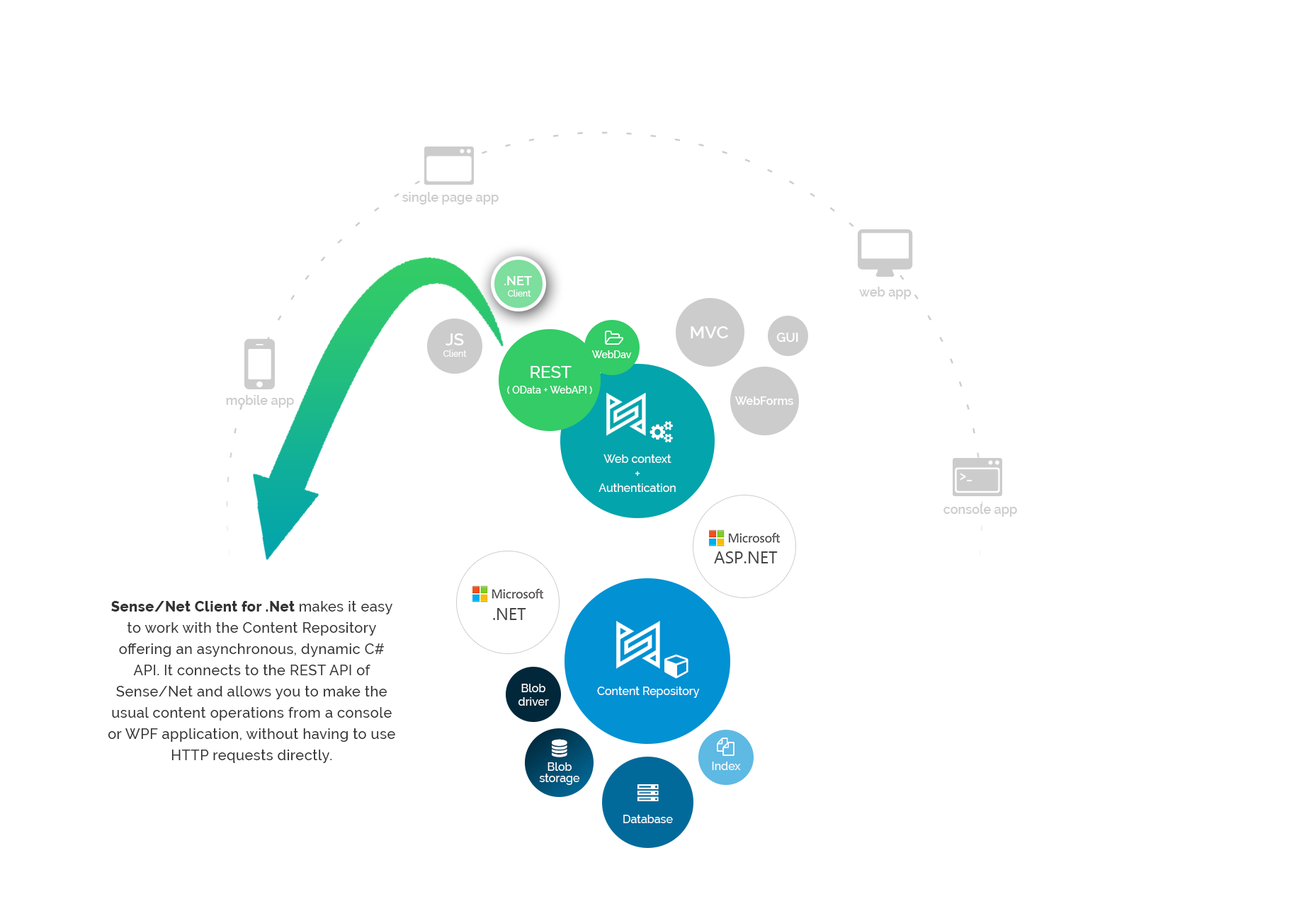
<style>
.page{position:relative;width:1316px;height:906px;background:#ffffff}
.page>*{position:absolute;margin:0}
.t1{font:12.7px "Raleway-SemiBold";color:#cccccc}
.t2{font:8.5px/11.3px "Raleway-Medium";color:#ffffff}
.t3{font:12.7px/11.3px "Raleway-SemiBold";color:#ffffff}
.t4{font:17.7px "Raleway-SemiBold";color:#ffffff}
.t5{font:17px/11.3px "Raleway-SemiBold";color:#ffffff}
.t6{font:12.7px "Raleway-SemiBold";color:#ffffff}
.t7{font:9.9px "Raleway-Medium";color:#ffffff}
.t8{font:17px "Raleway-Medium";color:#ffffff}
.t9{font:11.3px "Raleway-SemiBold";color:#ffffff}
.t10{font:11.3px "Raleway-Medium";color:#ffffff}
.t11{font:12.7px "Raleway-Medium";color:#ffffff}
.t12{font:17px "SegoeUI";color:#444444}
.t13{font:14.2px/21.2px "Raleway-Medium";letter-spacing:0.025em;color:#333333}
.t14{font:14.2px/21.2px "Raleway-ExtraBold";letter-spacing:0.025em;color:#333333}
.t15{font:11.3px/11.3px "Raleway-Medium";color:#ffffff}
</style>
<div class="page">
<p class="t1" style="left:402px;top:192px;width:96px;height:13px">single page app</p>
<p class="t2" style="left:504px;top:276px;width:28px;height:21px;text-align:center"><span class="t3">.NET <br></span>Client</p>
<p class="t1" style="left:859px;top:287px;width:52px;height:13px">web app</p>
<p class="t4" style="left:690px;top:326px;width:38px;height:12px">MVC</p>
<p class="t2" style="left:443px;top:334px;width:24px;height:23px;text-align:center"><span class="t5">JS<br></span>Client</p>
<p class="t6" style="left:776px;top:333px;width:22px;height:9px">GUI</p>
<p class="t7" style="left:591px;top:351px;width:41px;height:7px">WebDav</p>
<p class="t8" style="left:530px;top:366px;width:41px;height:12px">REST</p>
<p class="t7" style="left:507px;top:386px;width:85px;height:8px">( OData + WebAPI )</p>
<p class="t1" style="left:226px;top:395px;width:68px;height:13px">mobile app</p>
<p class="t9" style="left:734px;top:397px;width:59px;height:8px">WebForms</p>
<p class="t10" style="left:598px;top:455px;width:78px;height:37px;text-align:center">Web context<br><span class="t11">+<br></span>Authentication</p>
<p class="t6" style="left:959px;top:473px;width:13px;height:9px">&gt;_</p>
<p class="t1" style="left:943px;top:504px;width:74px;height:13px">console app</p>
<p class="t12" style="left:714px;top:552px;width:63px;height:12px">ASP.NET</p>
<p class="t13" style="left:108px;top:601px;width:287px;height:162px;text-align:center"><span class="t14">Sense/Net Client for .Net </span>makes it easy to work with the Content Repository offering an asynchronous, dynamic C# API. It connects to the REST API of Sense/Net and allows you to make the usual content operations from a console or WPF application, without having to use HTTP requests directly.</p>
<p class="t12" style="left:493px;top:608px;width:33px;height:12px">.NET</p>
<p class="t10" style="left:518px;top:684px;width:31px;height:22px;text-align:center">Blob<br>driver</p>
<p class="t10" style="left:597px;top:687px;width:103px;height:11px">Content Repository</p>
<p class="t10" style="left:712px;top:762px;width:29px;height:8px">Index</p>
<p class="t15" style="left:539px;top:763px;width:41px;height:22px;text-align:center">Blob storage</p>
<p class="t10" style="left:623px;top:815px;width:50px;height:9px">Database</p>
</div>
